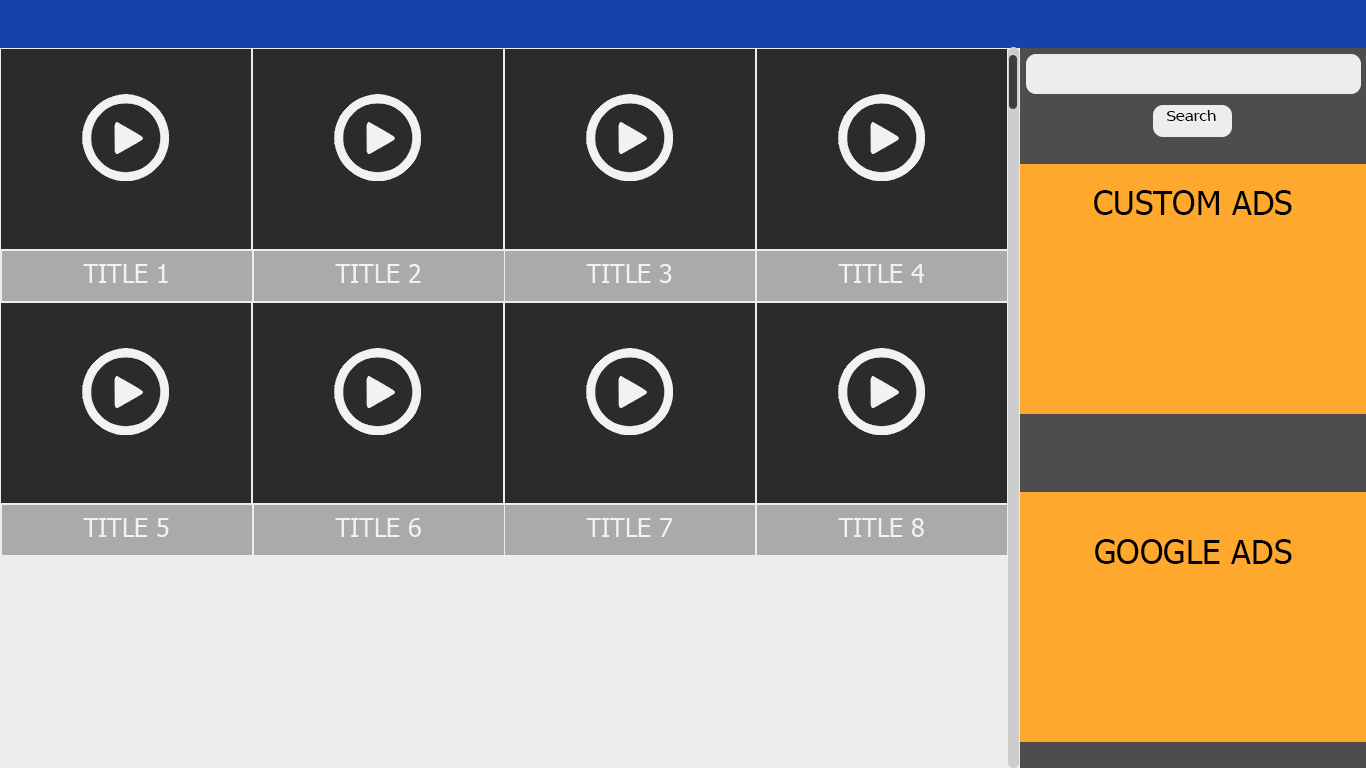
<style>
.page{position:relative;width:1366px;height:768px;background:#2b2b2b}
.page>*{position:absolute;margin:0}
.t1{font:10px "Tahoma";color:#000000;scale:1.2 1}
.t2{font:33.3px "Tahoma";color:#000000}
.t3{font:25px "Tahoma";color:#f2f2f2}
</style>
<div class="page">
<p class="t1" style="left:1167px;top:110px;width:49px;height:11px">Search</p>
<p class="t2" style="left:1094px;top:190px;width:198px;height:25px">CUSTOM ADS</p>
<p class="t3" style="left:83px;top:264px;width:85px;height:19px">TITLE 1</p>
<p class="t3" style="left:335px;top:264px;width:86px;height:19px">TITLE 2</p>
<p class="t3" style="left:586px;top:264px;width:86px;height:19px">TITLE 3</p>
<p class="t3" style="left:838px;top:264px;width:86px;height:19px">TITLE 4</p>
<p class="t3" style="left:83px;top:518px;width:86px;height:19px">TITLE 5</p>
<p class="t3" style="left:335px;top:518px;width:86px;height:19px">TITLE 6</p>
<p class="t3" style="left:586px;top:518px;width:86px;height:19px">TITLE 7</p>
<p class="t3" style="left:838px;top:518px;width:86px;height:19px">TITLE 8</p>
<p class="t2" style="left:1095px;top:539px;width:197px;height:25px">GOOGLE ADS</p>
</div>
